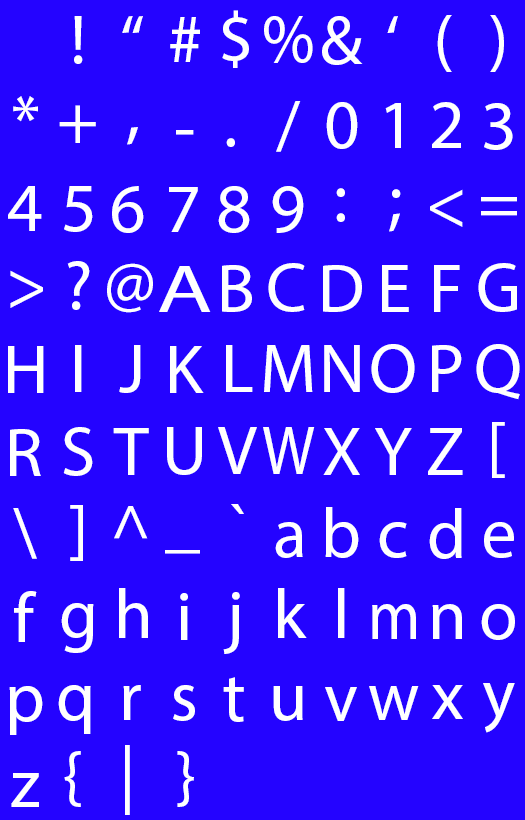
<style>
.page{position:relative;width:525px;height:820px;background:#2403ff}
.page>*{position:absolute;margin:0}
.t1{font:70px "MyriadPro-Regular";color:#ffffff}
.t2{font:70px "MyriadPro-Regular";color:#ffffff;scale:0.95 1}
.t3{font:69px "MyriadPro-Regular";color:#ffffff;scale:1.32 1}
.t4{font:70px "MyriadPro-Regular";color:#ffffff;scale:0.89 1}
.t5{font:70px "MyriadPro-Regular";color:#ffffff;scale:0.9 1}
</style>
<div class="page">
<p class="t1" style="left:74px;top:16px;width:9px;height:48px">!</p>
<p class="t1" style="left:122px;top:16px;width:21px;height:17px">“</p>
<p class="t1" style="left:170px;top:17px;width:30px;height:45px">#</p>
<p class="t1" style="left:222px;top:10px;width:27px;height:58px">$</p>
<p class="t2" style="left:264px;top:16px;width:49px;height:47px">%</p>
<p class="t1" style="left:322px;top:16px;width:41px;height:49px">&amp;</p>
<p class="t1" style="left:387px;top:16px;width:11px;height:17px">‘</p>
<p class="t1" style="left:437px;top:15px;width:15px;height:57px">(</p>
<p class="t1" style="left:490px;top:15px;width:14px;height:57px">)</p>
<p class="t1" style="left:13px;top:96px;width:25px;height:26px">*</p>
<p class="t1" style="left:276px;top:101px;width:25px;height:51px">/</p>
<p class="t1" style="left:326px;top:102px;width:32px;height:47px">0</p>
<p class="t1" style="left:432px;top:102px;width:29px;height:46px">2</p>
<p class="t1" style="left:59px;top:105px;width:37px;height:38px">+</p>
<p class="t1" style="left:385px;top:103px;width:16px;height:45px">1</p>
<p class="t1" style="left:484px;top:103px;width:29px;height:47px">3</p>
<p class="t1" style="left:127px;top:127px;width:11px;height:18px">,</p>
<p class="t1" style="left:176px;top:130px;width:18px;height:5px">-</p>
<p class="t1" style="left:226px;top:138px;width:9px;height:9px">.</p>
<p class="t1" style="left:8px;top:186px;width:34px;height:45px">4</p>
<p class="t1" style="left:64px;top:186px;width:29px;height:46px">5</p>
<p class="t1" style="left:112px;top:186px;width:32px;height:47px">6</p>
<p class="t1" style="left:169px;top:187px;width:29px;height:45px">7</p>
<p class="t1" style="left:218px;top:186px;width:32px;height:47px">8</p>
<p class="t1" style="left:272px;top:186px;width:32px;height:47px">9</p>
<p class="t1" style="left:336px;top:188px;width:9px;height:34px">:</p>
<p class="t1" style="left:389px;top:189px;width:12px;height:43px">;</p>
<p class="t1" style="left:430px;top:189px;width:33px;height:38px">&lt;</p>
<p class="t1" style="left:481px;top:197px;width:36px;height:19px">=</p>
<p class="t1" style="left:10px;top:270px;width:33px;height:38px">&gt;</p>
<p class="t1" style="left:67px;top:261px;width:23px;height:49px">?</p>
<p class="t1" style="left:107px;top:263px;width:46px;height:50px">@</p>
<p class="t3" style="left:159px;top:266px;width:52px;height:46px">A</p>
<p class="t1" style="left:222px;top:265px;width:30px;height:47px">B</p>
<p class="t1" style="left:268px;top:263px;width:37px;height:49px">C</p>
<p class="t1" style="left:323px;top:265px;width:39px;height:47px">D</p>
<p class="t1" style="left:382px;top:265px;width:27px;height:47px">E</p>
<p class="t1" style="left:434px;top:265px;width:26px;height:47px">F</p>
<p class="t1" style="left:478px;top:263px;width:39px;height:49px">G</p>
<p class="t1" style="left:8px;top:346px;width:36px;height:47px">H</p>
<p class="t1" style="left:75px;top:345px;width:7px;height:47px">I</p>
<p class="t1" style="left:119px;top:345px;width:22px;height:48px">J</p>
<p class="t1" style="left:170px;top:346px;width:34px;height:47px">K</p>
<p class="t1" style="left:226px;top:345px;width:27px;height:47px">L</p>
<p class="t1" style="left:264px;top:345px;width:49px;height:47px">M</p>
<p class="t1" style="left:324px;top:345px;width:36px;height:47px">N</p>
<p class="t1" style="left:371px;top:344px;width:44px;height:49px">O</p>
<p class="t1" style="left:432px;top:345px;width:30px;height:47px">P</p>
<p class="t1" style="left:476px;top:344px;width:44px;height:56px">Q</p>
<p class="t1" style="left:492px;top:422px;width:13px;height:56px">[</p>
<p class="t1" style="left:10px;top:429px;width:31px;height:47px">R</p>
<p class="t1" style="left:63px;top:427px;width:30px;height:49px">S</p>
<p class="t1" style="left:113px;top:428px;width:36px;height:47px">T</p>
<p class="t1" style="left:167px;top:427px;width:35px;height:48px">U</p>
<p class="t1" style="left:218px;top:427px;width:39px;height:47px">V</p>
<p class="t4" style="left:263px;top:427px;width:52px;height:47px">W</p>
<p class="t1" style="left:323px;top:428px;width:37px;height:47px">X</p>
<p class="t1" style="left:375px;top:428px;width:37px;height:47px">Y</p>
<p class="t1" style="left:428px;top:428px;width:35px;height:47px">Z</p>
<p class="t1" style="left:13px;top:508px;width:24px;height:51px">\</p>
<p class="t1" style="left:70px;top:505px;width:13px;height:56px">]</p>
<p class="t1" style="left:114px;top:506px;width:34px;height:33px">^</p>
<p class="t1" style="left:231px;top:504px;width:13px;height:10px">`</p>
<p class="t1" style="left:325px;top:507px;width:34px;height:51px">b</p>
<p class="t1" style="left:429px;top:508px;width:33px;height:51px">d</p>
<p class="t1" style="left:275px;top:522px;width:28px;height:36px">a</p>
<p class="t1" style="left:379px;top:522px;width:28px;height:36px">c</p>
<p class="t1" style="left:484px;top:522px;width:30px;height:36px">e</p>
<p class="t1" style="left:165px;top:550px;width:35px;height:4px">_</p>
<p class="t1" style="left:14px;top:591px;width:23px;height:51px">f</p>
<p class="t1" style="left:119px;top:588px;width:29px;height:50px">h</p>
<p class="t1" style="left:180px;top:593px;width:8px;height:47px">i</p>
<p class="t1" style="left:223px;top:592px;width:17px;height:62px">j</p>
<p class="t1" style="left:278px;top:588px;width:29px;height:50px">k</p>
<p class="t1" style="left:338px;top:588px;width:7px;height:50px">l</p>
<p class="t1" style="left:61px;top:603px;width:33px;height:50px">g</p>
<p class="t5" style="left:372px;top:604px;width:44px;height:35px">m</p>
<p class="t1" style="left:432px;top:604px;width:30px;height:35px">n</p>
<p class="t1" style="left:481px;top:604px;width:34px;height:36px">o</p>
<p class="t1" style="left:223px;top:677px;width:21px;height:45px">t</p>
<p class="t1" style="left:9px;top:686px;width:34px;height:49px">p</p>
<p class="t1" style="left:58px;top:685px;width:33px;height:49px">q</p>
<p class="t1" style="left:123px;top:685px;width:18px;height:35px">r</p>
<p class="t1" style="left:173px;top:685px;width:22px;height:36px">s</p>
<p class="t1" style="left:273px;top:686px;width:30px;height:35px">u</p>
<p class="t1" style="left:325px;top:687px;width:32px;height:34px">v</p>
<p class="t1" style="left:369px;top:686px;width:50px;height:34px">w</p>
<p class="t1" style="left:432px;top:685px;width:31px;height:34px">x</p>
<p class="t1" style="left:483px;top:683px;width:32px;height:50px">y</p>
<p class="t1" style="left:125px;top:745px;width:5px;height:70px">|</p>
<p class="t1" style="left:64px;top:751px;width:17px;height:56px">{</p>
<p class="t1" style="left:177px;top:751px;width:17px;height:56px">}</p>
<p class="t1" style="left:11px;top:773px;width:28px;height:34px">z</p>
</div>
